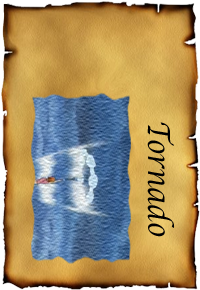
<style>
.page{position:relative;width:200px;height:290px}
.page>*{position:absolute;margin:0}
.t1{font:30.5px "LucidaCalligraphy-Italic";color:#000000;scale:0.85 1}
</style>
<div class="page">
<p class="t1" style="left:147px;top:122px;width:27px;height:115px;rotate:90deg">Tornado</p>
</div>
